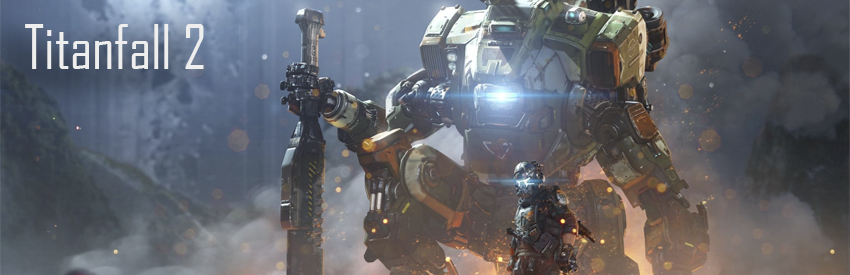
<style>
.page{position:relative;width:850px;height:275px}
.page>*{position:absolute;margin:0}
.t1{font:59.2px "AgencyFB-Reg";color:#eeeeee}
</style>
<div class="page">
<p class="t1" style="left:25px;top:24px;width:179px;height:45px">Titanfall 2</p>
</div>
